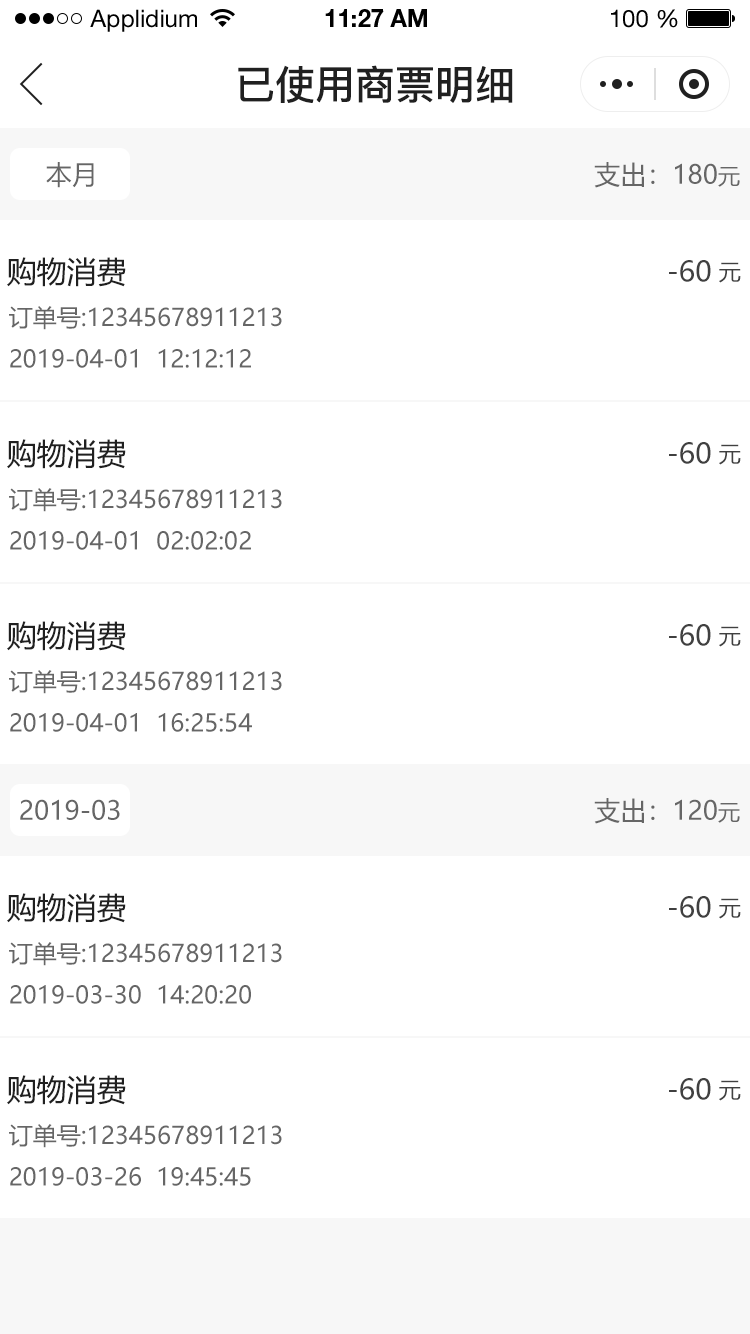
<style>
.page{position:relative;width:750px;height:1334px;background:#ffffff}
.page>*{position:absolute;margin:0}
.t1{font:24px "HelveticaNeueLTStd-Roman";color:#000000}
.t2{font:24px "HelveticaNeueLTStd-Bd";color:#000000}
.t3{font:40px "PingFang-SC-Bold";color:#202020;text-transform:uppercase}
.t4{font:26px "MicrosoftYaHei";color:#666666;text-transform:uppercase}
.t5{font:22px "MicrosoftYaHei";color:#666666;text-transform:uppercase}
.t6{font:30px "MicrosoftYaHei";color:#202020;text-transform:uppercase}
.t7{font:28px "MicrosoftYaHei";color:#404040;text-transform:uppercase}
.t8{font:22px "MicrosoftYaHei";color:#404040;text-transform:uppercase}
.t9{font:24px "MicrosoftYaHei";color:#666666;text-transform:uppercase}
</style>
<div class="page">
<p class="t1" style="left:90px;top:9px;width:107px;height:23px">Applidium</p>
<p class="t2" style="left:325px;top:9px;width:102px;height:18px">11:27 AM</p>
<p class="t1" style="left:611px;top:9px;width:67px;height:19px">100 %</p>
<p class="t3" style="left:238px;top:65px;width:275px;height:38px">已使用商票明细</p>
<p class="t4" style="left:46px;top:162px;width:48px;height:26px">本月</p>
<p class="t4" style="left:594px;top:162px;width:146px;height:26px">支出：180<span class="t5">元</span></p>
<p class="t6" style="left:7px;top:257px;width:119px;height:30px">购物消费</p>
<p class="t7" style="left:669px;top:260px;width:42px;height:22px">-60</p>
<p class="t8" style="left:719px;top:262px;width:22px;height:21px">元</p>
<p class="t9" style="left:9px;top:306px;width:273px;height:24px">订单号:12345678911213</p>
<p class="t9" style="left:10px;top:349px;width:241px;height:19px">2019-04-01  12:12:12</p>
<p class="t6" style="left:7px;top:439px;width:119px;height:30px">购物消费</p>
<p class="t7" style="left:669px;top:442px;width:42px;height:22px">-60</p>
<p class="t8" style="left:719px;top:444px;width:22px;height:21px">元</p>
<p class="t9" style="left:9px;top:488px;width:273px;height:24px">订单号:12345678911213</p>
<p class="t9" style="left:10px;top:531px;width:241px;height:19px">2019-04-01  02:02:02</p>
<p class="t6" style="left:7px;top:621px;width:119px;height:30px">购物消费</p>
<p class="t7" style="left:669px;top:624px;width:42px;height:22px">-60</p>
<p class="t8" style="left:719px;top:626px;width:22px;height:21px">元</p>
<p class="t9" style="left:9px;top:670px;width:273px;height:24px">订单号:12345678911213</p>
<p class="t9" style="left:10px;top:713px;width:242px;height:19px">2019-04-01  16:25:54</p>
<p class="t4" style="left:594px;top:798px;width:146px;height:26px">支出：120<span class="t5">元</span></p>
<p class="t4" style="left:20px;top:799px;width:100px;height:21px">2019-03</p>
<p class="t6" style="left:7px;top:893px;width:119px;height:30px">购物消费</p>
<p class="t7" style="left:669px;top:896px;width:42px;height:22px">-60</p>
<p class="t8" style="left:719px;top:898px;width:22px;height:21px">元</p>
<p class="t9" style="left:9px;top:942px;width:273px;height:24px">订单号:12345678911213</p>
<p class="t9" style="left:10px;top:985px;width:241px;height:19px">2019-03-30  14:20:20</p>
<p class="t6" style="left:7px;top:1075px;width:119px;height:30px">购物消费</p>
<p class="t7" style="left:669px;top:1078px;width:42px;height:22px">-60</p>
<p class="t8" style="left:719px;top:1080px;width:22px;height:21px">元</p>
<p class="t9" style="left:9px;top:1124px;width:273px;height:24px">订单号:12345678911213</p>
<p class="t9" style="left:10px;top:1167px;width:241px;height:19px">2019-03-26  19:45:45</p>
</div>
